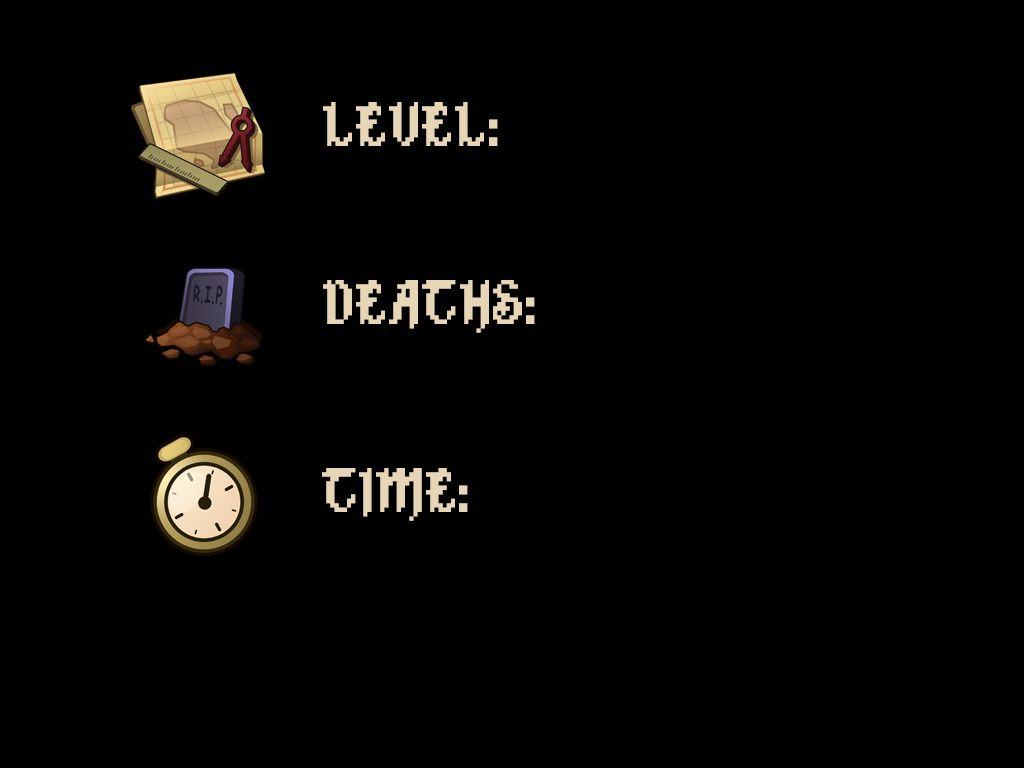
<style>
.page{position:relative;width:1024px;height:768px;background:#000000}
.page>*{position:absolute;margin:0}
.t1{font:70.4px "Alkhemikal";color:#e7d6b6;scale:0.94 1}
</style>
<div class="page">
<p class="t1" style="left:323px;top:102px;width:175px;height:44px">LEVEL:</p>
<p class="t1" style="left:323px;top:280px;width:212px;height:53px">DEATHS:</p>
<p class="t1" style="left:322px;top:468px;width:146px;height:53px">TIME:</p>
</div>
